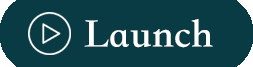
<style>
.page{position:relative;width:253px;height:67px;background:#093b45}
.page>*{position:absolute;margin:0}
.t1{font:41.7px "STSongti-TC-Bold";color:#ffffff}
</style>
<div class="page">
<p class="t1" style="left:84px;top:19px;width:129px;height:29px">Launch</p>
</div>
